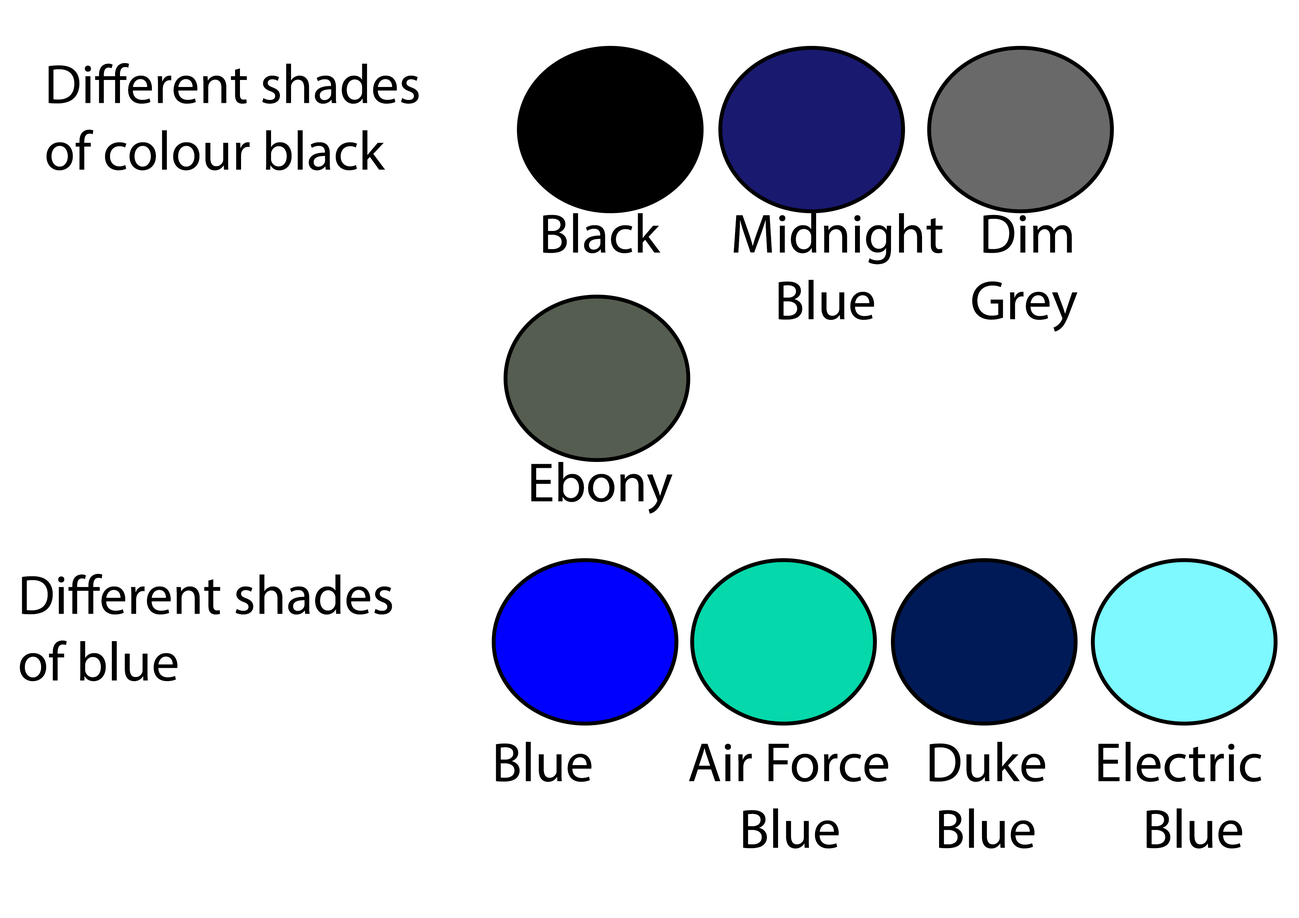
<style>
.page{position:relative;width:1299px;height:918px;background:#ffffff}
.page>*{position:absolute;margin:0}
.t1{font:55.5px "MyriadPro-Regular";color:#000000}
</style>
<div class="page">
<p class="t1" style="left:46px;top:63px;width:373px;height:108px">Different shades<br>of colour black</p>
<p class="t1" style="left:543px;top:213px;width:534px;height:119px">Black      Midnight   Dim<br>                       Blue        Grey</p>
<p class="t1" style="left:531px;top:462px;width:141px;height:52px">Ebony</p>
<p class="t1" style="left:20px;top:574px;width:372px;height:108px">Different shades<br>of blue</p>
<p class="t1" style="left:496px;top:742px;width:765px;height:107px">Blue        Air Force   Duke    Electric<br>                     Blue        Blue         Blue</p>
</div>
